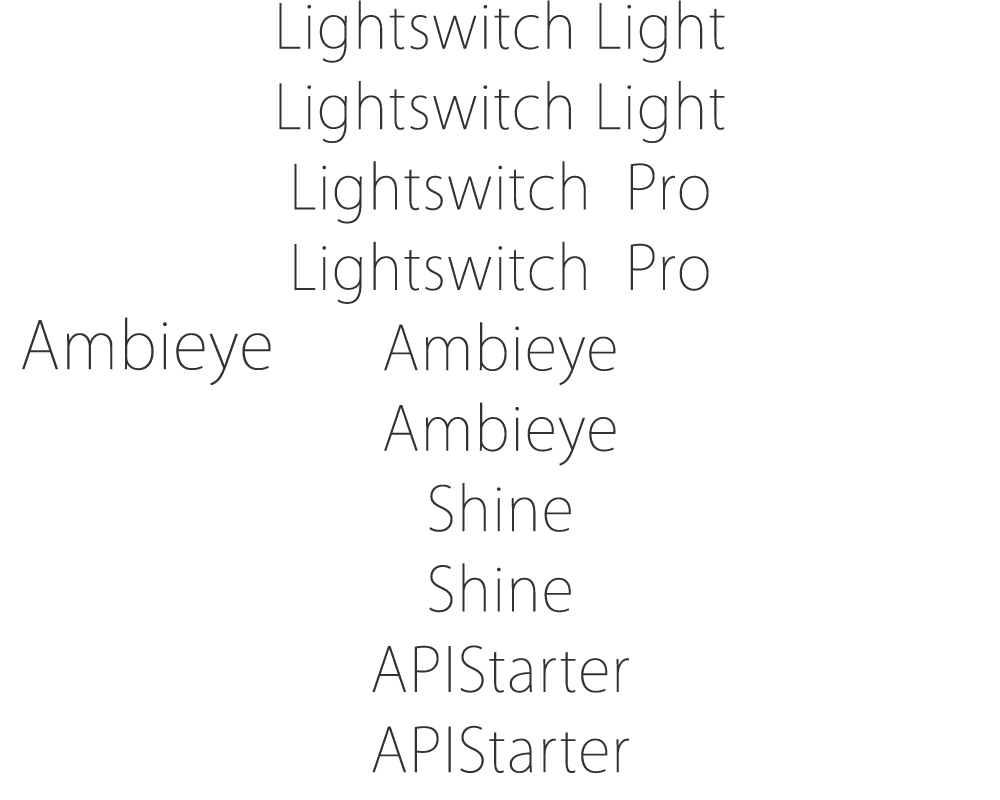
<style>
.page{position:relative;width:1000px;height:800px;background:#ffffff}
.page>*{position:absolute;margin:0}
.t1{font:67px "MyriadSetPro-Ultralight";color:#343131;font-weight:bold}
.t2{font:72px "MyriadSetPro-Ultralight";color:#343131;font-weight:bold}
</style>
<div class="page">
<p class="t1" style="left:279px;top:0px;width:446px;height:773px;text-align:center">Lightswitch Light<br>Lightswitch Light<br>Lightswitch  Pro<br>Lightswitch  Pro<br>Ambieye<br>Ambieye<br>Shine<br>Shine<br>APIStarter<br>APIStarter</p>
<p class="t2" style="left:22px;top:317px;width:249px;height:69px">Ambieye</p>
</div>
